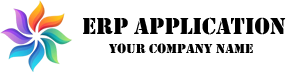
<style>
.page{position:relative;width:301px;height:72px;background:#ffffff}
.page>*{position:absolute;margin:0}
.t1{font:24px "Stencil";color:#000000}
.t2{font:14px "Stencil";color:#000000}
</style>
<div class="page">
<p class="t1" style="left:83px;top:17px;width:203px;height:18px">ERP APPLICATION</p>
<p class="t2" style="left:109px;top:43px;width:144px;height:11px">YOUR Company name</p>
</div>
